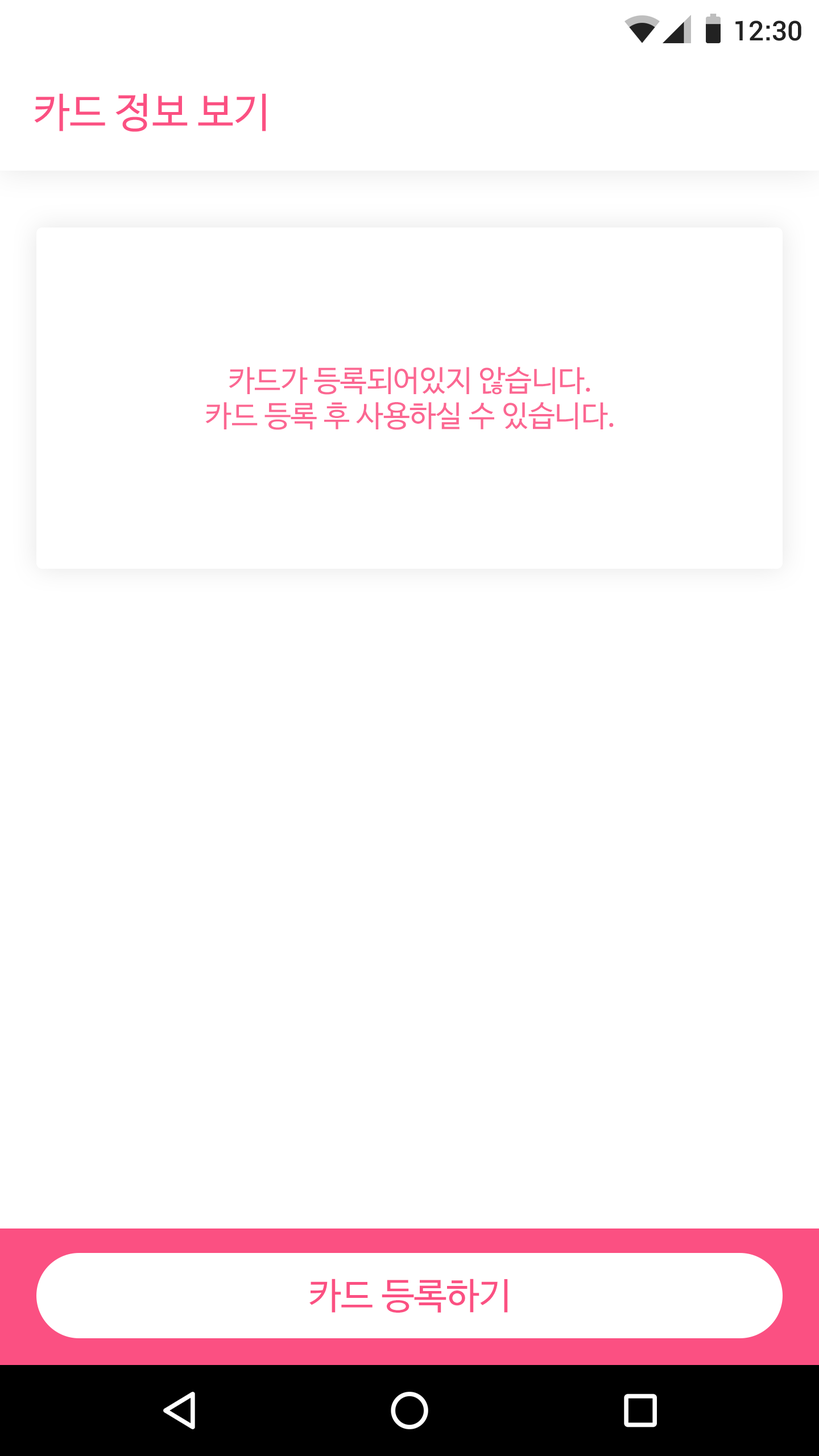
<style>
.page{position:relative;width:819px;height:1456px;background:#ffffff}
.page>*{position:absolute;margin:0}
.t1{font:27.3px "Roboto-Medium";color:#222222}
.t2{font:40.9px "NanumBarunGothic";color:#fb5082}
.t3{font:29.6px "NanumBarunGothic";color:#fb6792}
.t4{font:36.4px "NanumBarunGothic";color:#fb5082}
</style>
<div class="page">
<p class="t1" style="left:735px;top:20px;width:66px;height:21px">12:30</p>
<p class="t2" style="left:34px;top:93px;width:232px;height:39px">카드 정보 보기</p>
<p class="t3" style="left:205px;top:367px;width:409px;height:63px;text-align:center">카드가 등록되어있지 않습니다.<br>카드 등록 후 사용하실 수 있습니다.</p>
<p class="t4" style="left:309px;top:1279px;width:199px;height:34px">카드 등록하기</p>
</div>
